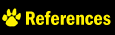
<style>
.page{position:relative;width:115px;height:35px;background:#000000}
.page>*{position:absolute;margin:0}
.t1{font:20px "FranklinGotT-DemCon";color:#fff100}
</style>
<div class="page">
<p class="t1" style="left:26px;top:11px;width:85px;height:14px">References</p>
</div>
